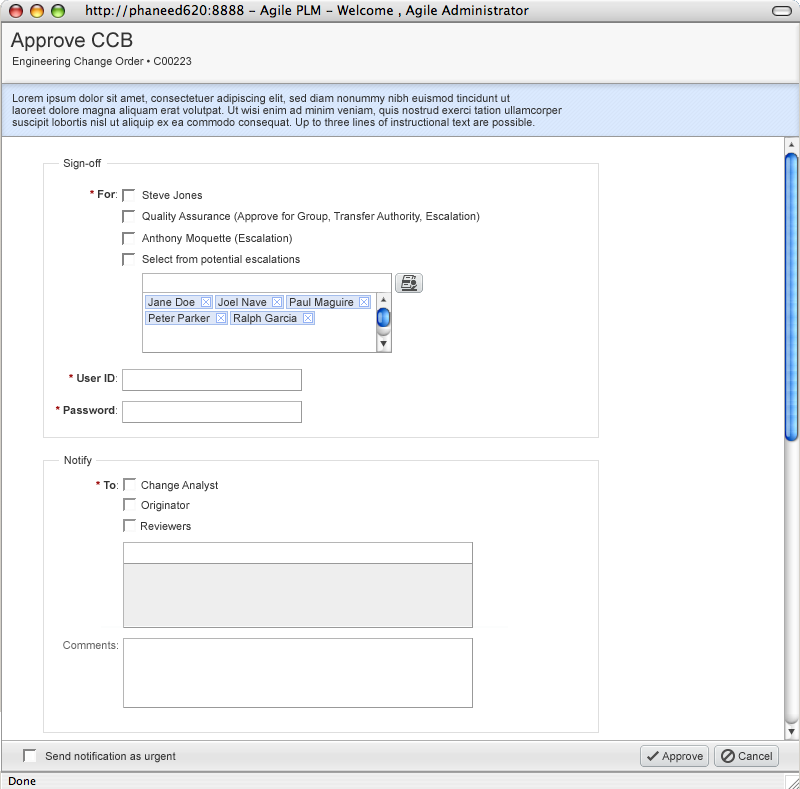
<style>
.page{position:relative;width:800px;height:789px;background:#ffffff}
.page>*{position:absolute;margin:0}
.t1{font:20px "ArialMT";color:#333333}
.t2{font:11px "ArialMT";color:#333333}
.t3{font:11px/12px "ArialMT";color:#333333}
.t4{font:11px "Arial-BoldMT";color:#333333}
.t5{font:11px "Arial-BoldMT";color:#990000}
.t6{font:11px "ArialMT";color:#666666}
.t7{font:11px "ArialMT";color:#656565}
</style>
<div class="page">
<p class="t1" style="left:10px;top:32px;width:123px;height:19px">Approve CCB</p>
<p class="t2" style="left:13px;top:57px;width:179px;height:11px">Engineering Change Order • C00223</p>
<p class="t3" style="left:12px;top:94px;width:550px;height:35px">Lorem ipsum dolor sit amet, consectetuer adipiscing elit, sed diam nonummy nibh euismod tincidunt ut <br>laoreet dolore magna aliquam erat volutpat. Ut wisi enim ad minim veniam, quis nostrud exerci tation ullamcorper <br>suscipit lobortis nisl ut aliquip ex ea commodo consequat. Up to three lines of instructional text are possible.</p>
<p class="t2" style="left:63px;top:159px;width:39px;height:11px">Sign-off</p>
<p class="t4" style="left:90px;top:190px;width:27px;height:8px"><span class="t5">*</span> For<span class="t6">:</span></p>
<p class="t2" style="left:142px;top:191px;width:60px;height:8px">Steve Jones</p>
<p class="t2" style="left:142px;top:212px;width:338px;height:11px">Quality Assurance (Approve for Group, Transfer Authority, Escalation)</p>
<p class="t2" style="left:142px;top:234px;width:150px;height:11px">Anthony Moquette (Escalation)</p>
<p class="t2" style="left:142px;top:255px;width:158px;height:11px">Select from potential escalations</p>
<p class="t4" style="left:69px;top:374px;width:48px;height:8px"><span class="t5">*</span> User ID<span class="t6">:</span></p>
<p class="t4" style="left:55px;top:406px;width:62px;height:8px"><span class="t5">*</span> Password<span class="t6">:</span></p>
<p class="t2" style="left:64px;top:456px;width:28px;height:11px">Notify</p>
<p class="t4" style="left:96px;top:481px;width:22px;height:8px"><span class="t5">*</span> To<span class="t7">:</span></p>
<p class="t2" style="left:141px;top:481px;width:77px;height:11px">Change Analyst</p>
<p class="t2" style="left:141px;top:501px;width:49px;height:11px">Originator</p>
<p class="t2" style="left:141px;top:522px;width:50px;height:8px">Reviewers</p>
<p class="t7" style="left:63px;top:641px;width:55px;height:8px">Comments:</p>
<p class="t2" style="left:45px;top:752px;width:131px;height:11px">Send notification as urgent</p>
<p class="t2" style="left:662px;top:752px;width:41px;height:11px">Approve</p>
<p class="t2" style="left:738px;top:752px;width:34px;height:8px">Cancel</p>
</div>
